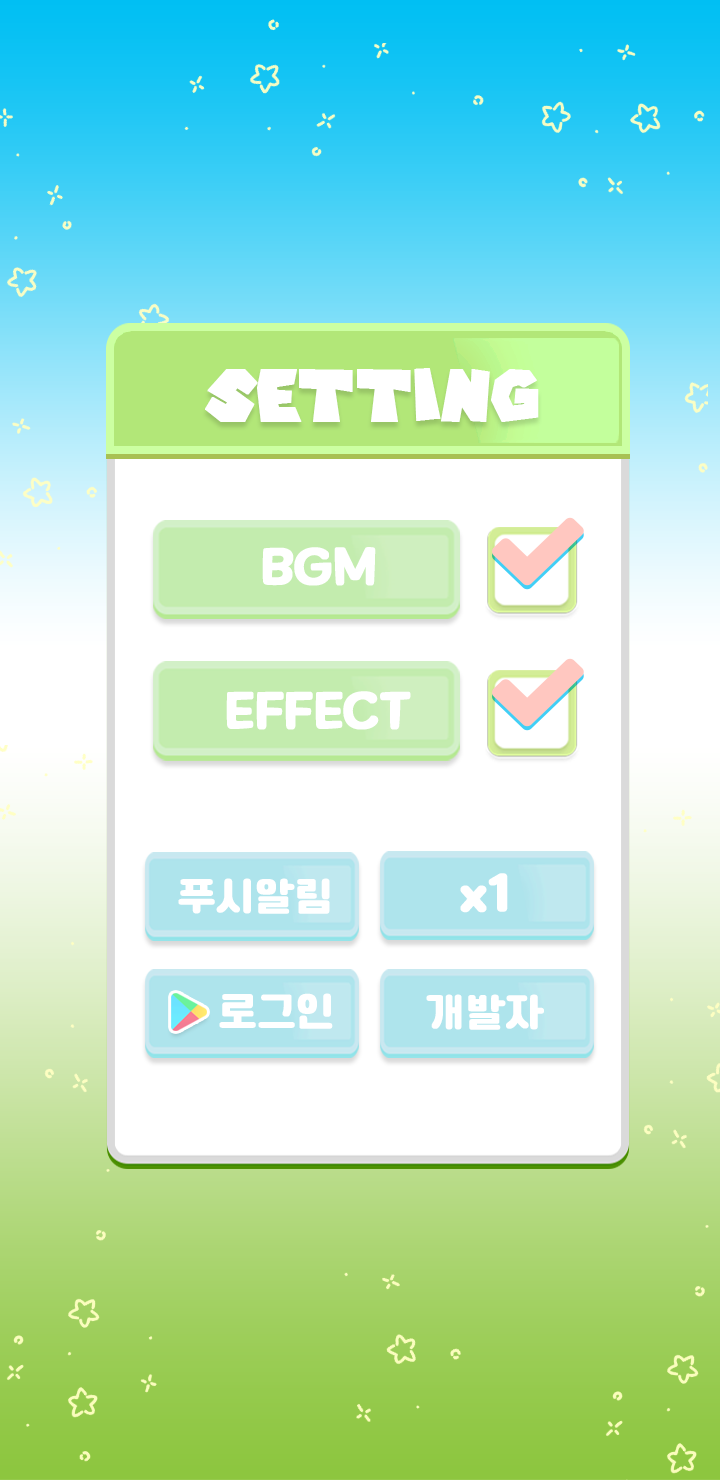
<style>
.page{position:relative;width:720px;height:1480px;background:#ffffff}
.page>*{position:absolute;margin:0}
.t1{font:70px "SuperMarioGalaxy";color:#ffffff;font-weight:bold}
.t2{font:50px "MaplestoryBold";color:#ffffff;font-weight:bold}
.t3{font:40px "Cafe24Ssurround";color:#ffffff;font-weight:bold}
.t4{font:50px "Cafe24Ssurround";color:#ffffff;font-weight:bold}
</style>
<div class="page">
<p class="t1" style="left:205px;top:368px;width:334px;height:54px">setting</p>
<p class="t2" style="left:262px;top:547px;width:114px;height:39px">BGM</p>
<p class="t2" style="left:226px;top:691px;width:185px;height:39px">EFFECT</p>
<p class="t3" style="left:178px;top:878px;width:152px;height:36px">푸시알림</p>
<p class="t4" style="left:460px;top:873px;width:48px;height:40px">x1</p>
<p class="t3" style="left:219px;top:993px;width:114px;height:36px">로그인</p>
<p class="t3" style="left:426px;top:994px;width:118px;height:36px">개발자</p>
</div>
